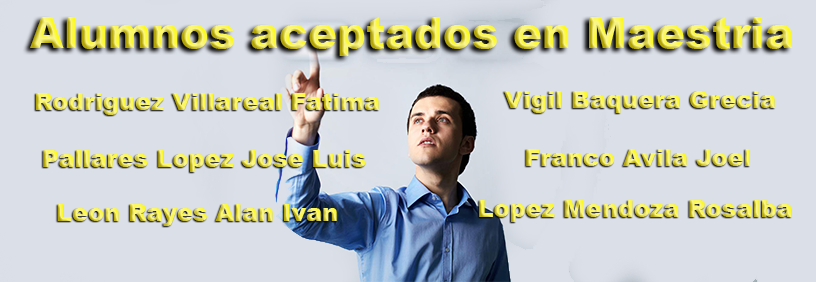
<style>
.page{position:relative;width:816px;height:282px;background:#dbdfe8}
.page>*{position:absolute;margin:0}
.t1{font:43.5px "Arial-Black"}
.t2{font:24px "Arial-Black"}
</style>
<div class="page">
<p class="t1" style="left:30px;top:17px;width:763px;height:39px">Alumnos aceptados en Maestria</p>
<p class="t2" style="left:35px;top:93px;width:345px;height:22px">Rodriguez Villareal Fatima</p>
<p class="t2" style="left:504px;top:91px;width:272px;height:22px">Vigil Baquera Grecia</p>
<p class="t2" style="left:43px;top:150px;width:323px;height:22px">Pallares Lopez Jose Luis</p>
<p class="t2" style="left:526px;top:149px;width:224px;height:17px">Franco Avila Joel</p>
<p class="t2" style="left:57px;top:204px;width:280px;height:22px">Leon Rayes Alan Ivan</p>
<p class="t2" style="left:479px;top:200px;width:313px;height:22px">Lopez Mendoza Rosalba</p>
</div>
